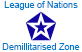
<style>
.page{position:relative;width:82px;height:52px;background:#ffffff}
.page>*{position:absolute;margin:0}
.t1{font:9px "ArialMT";color:#0179cb}
</style>
<div class="page">
<p class="t1" style="left:4px;top:1px;width:74px;height:9px">League of Nations</p>
<p class="t1" style="left:2px;top:43px;width:78px;height:7px">Demillitarised Zone</p>
</div>
